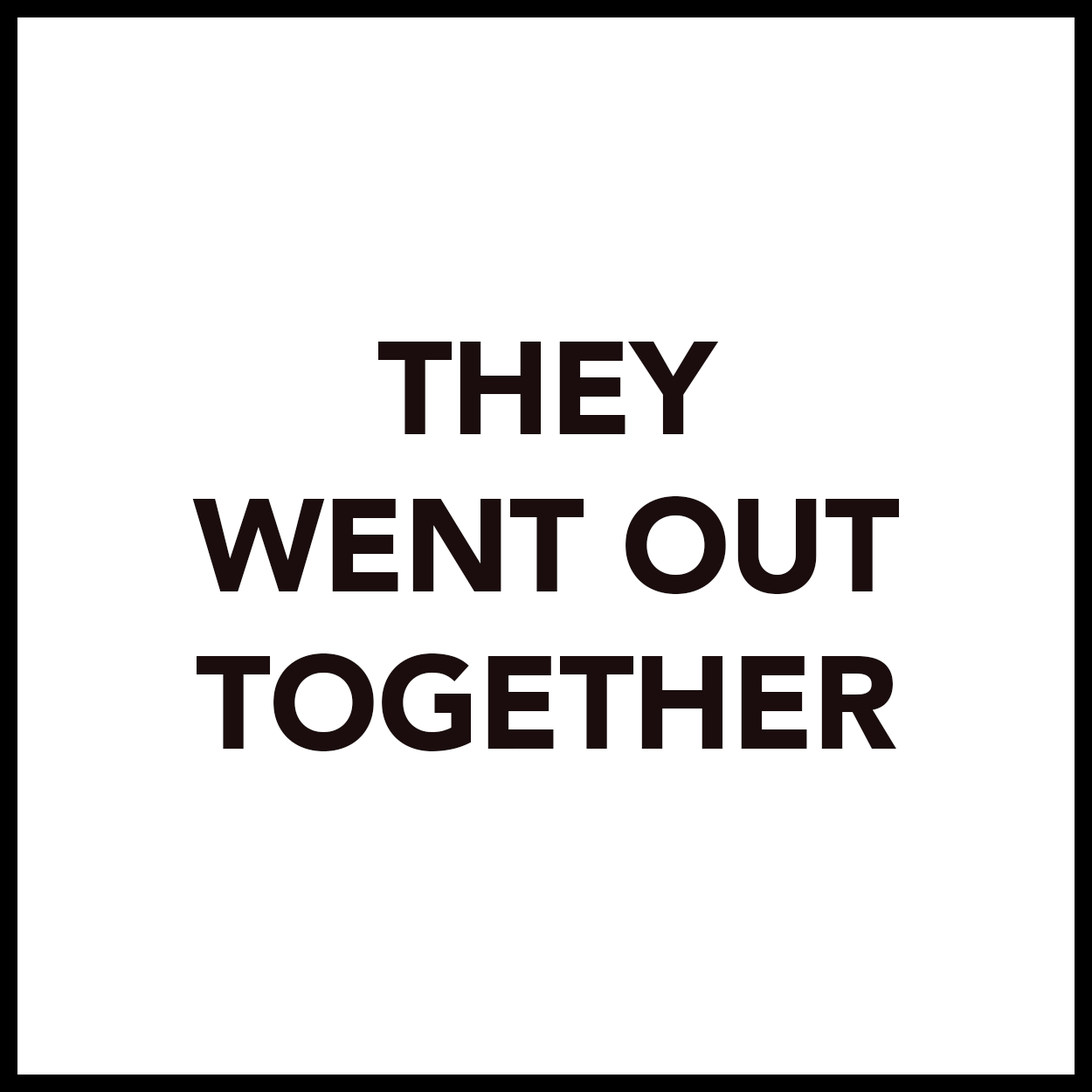
<style>
.page{position:relative;width:1092px;height:1092px;background:#ffffff}
.page>*{position:absolute;margin:0}
.t1{font:131px "Avenir-Black";letter-spacing:-0.01em;color:#1b0d0d}
</style>
<div class="page">
<p class="t1" style="left:192px;top:342px;width:708px;height:409px;text-align:center">THEY<br>WENT OUT<br>TOGETHER</p>
</div>
